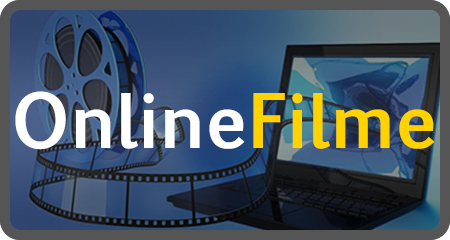
<style>
.page{position:relative;width:450px;height:240px}
.page>*{position:absolute;margin:0}
.t1{font:72px "EuphemiaUCAS-Bold";color:#ffffff}
.t2{font:72px "EuphemiaUCAS-Bold";color:#ffd200}
</style>
<div class="page">
<p class="t1" style="left:15px;top:91px;width:420px;height:59px">Online<span class="t2">Filme</span></p>
</div>
